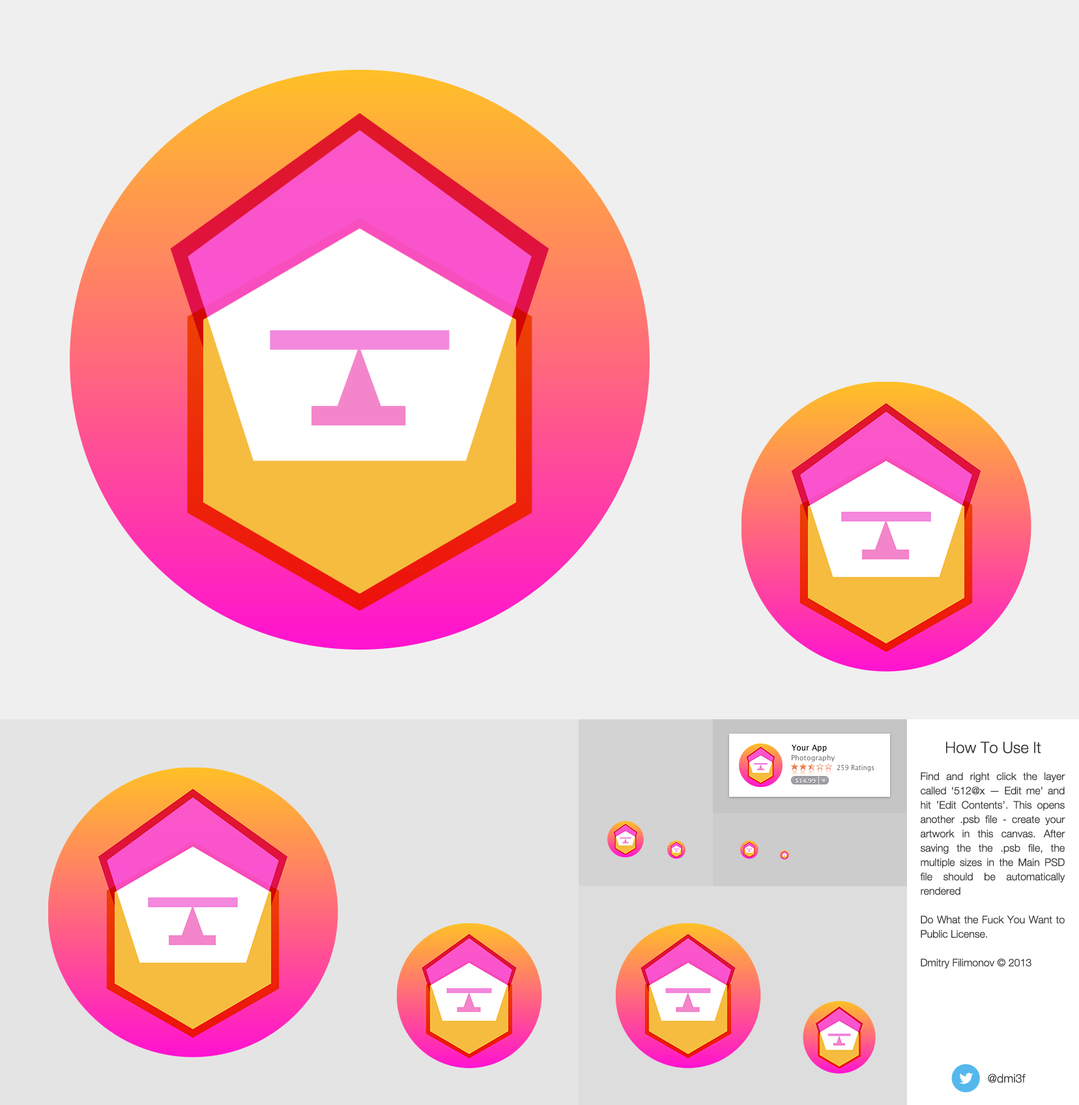
<style>
.page{position:relative;width:1079px;height:1105px;background:#efefef}
.page>*{position:absolute;margin:0}
.t1{font:15.6px "HelveticaNeue-Light";color:#363636}
.t2{font:10.4px/14.3px "HelveticaNeue-Light";color:#363636}
.t3{font:11.7px "HelveticaNeue-Light";color:#363636}
</style>
<div class="page">
<p class="t1" style="left:946px;top:742px;width:95px;height:12px">How To Use It</p>
<p class="t2" style="left:920px;top:772px;width:145px;height:197px;text-align:justify">Find and right click the layer called ‘512@x — Edit me' and hit ’Edit Contents’. This opens another .psb file - create your artwork in this canvas. After saving the the .psb file, the multiple sizes in the Main PSD file should be automatically rendered<br><br>Do What the Fuck You Want to Public License. <br><br>Dmitry Filimonov © 2013</p>
<p class="t3" style="left:988px;top:1074px;width:38px;height:9px">@dmi3f</p>
</div>
